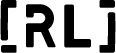
<style>
.page{position:relative;width:116px;height:53px;background:#ffffff}
.page>*{position:absolute;margin:0}
.t1{font:60px "LEIXO-Bold";color:#000000}
</style>
<div class="page">
<p class="t1" style="left:0px;top:0px;width:116px;height:53px">[RL]</p>
</div>
